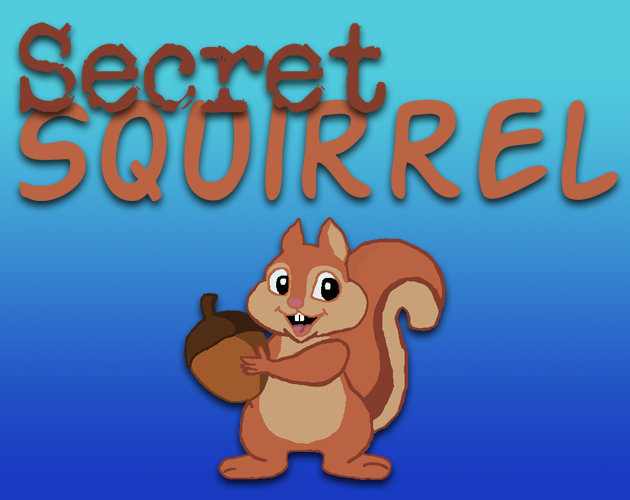
<style>
.page{position:relative;width:630px;height:500px}
.page>*{position:absolute;margin:0}
.t1{font:129.7px "VeteranTypewriter";color:#843c2d}
.t2{font:155.6px "ActionMan";color:#ba6443}
</style>
<div class="page">
<p class="t1" style="left:19px;top:22px;width:367px;height:91px">Secret</p>
<p class="t2" style="left:19px;top:98px;width:599px;height:103px">Squirrel</p>
</div>
